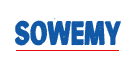
<style>
.page{position:relative;width:134px;height:62px;background:#ffffff}
.page>*{position:absolute;margin:0}
.t1{font:35px "SheRocks";color:#1158a6}
</style>
<div class="page">
<p class="t1" style="left:14px;top:18px;width:107px;height:28px">Sowemy</p>
</div>
